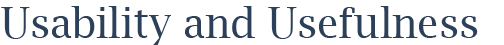
<style>
.page{position:relative;width:504px;height:45px;background:#ffffff}
.page>*{position:absolute;margin:0}
.t1{font:40px "LucidaBright";color:#2d4059}
</style>
<div class="page">
<p class="t1" style="left:1px;top:6px;width:477px;height:40px">Usability and Usefulness</p>
</div>
